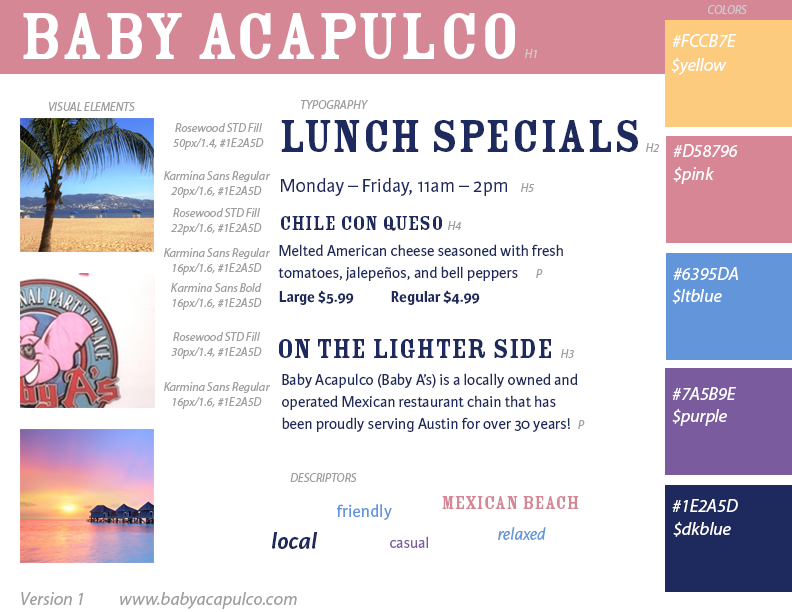
<style>
.page{position:relative;width:792px;height:612px;background:#fefffe}
.page>*{position:absolute;margin:0}
.t1{font:12px "MyriadPro-It";color:#cccaca}
.t2{font:72px "RosewoodStd-Fill";color:#ffffff}
.t3{font:18px "MyriadPro-It";color:#ffffff}
.t4{font:12px "MyriadPro-It";color:#9e9e9e}
.t5{font:50px "RosewoodStd-Fill";color:#1e2a5d}
.t6{font:20px "KarminaSans";color:#1e2a5d}
.t7{font:22px "RosewoodStd-Fill";color:#1e2a5d}
.t8{font:16px/22px "KarminaSans";color:#1e2a5d}
.t9{font:16px "KarminaSans-Bold";color:#1e2a5d}
.t10{font:30px "RosewoodStd-Fill";color:#1e2a5d}
.t11{font:20px "RosewoodStd-Fill";color:#d58796}
.t12{font:18px "KarminaSans";color:#6395da}
.t13{font:24px "KarminaSans-BoldItalic";color:#1e2a5d}
.t14{font:18px "KarminaSans-Italic";color:#6395da}
.t15{font:16px "KarminaSans";color:#7a5b9e}
.t16{font:18px "MyriadPro-It";color:#9e9e9e}
</style>
<div class="page">
<p class="t1" style="left:708px;top:5px;width:39px;height:9px">COLORS</p>
<p class="t2" style="left:23px;top:13px;width:492px;height:46px">BABY ACAPULCO</p>
<p class="t3" style="left:672px;top:34px;width:64px;height:13px">#FCCB7E</p>
<p class="t1" style="left:525px;top:49px;width:12px;height:9px">H1</p>
<p class="t3" style="left:671px;top:57px;width:56px;height:18px">$yellow</p>
<p class="t4" style="left:49px;top:102px;width:86px;height:9px">VISUAL ELEMENTS</p>
<p class="t4" style="left:300px;top:100px;width:68px;height:9px">TYPOGRAPHY</p>
<p class="t4" style="left:173px;top:123px;width:91px;height:27px;text-align:center">Rosewood STD Fill<br>50px/1.4, #1E2A5D</p>
<p class="t5" style="left:281px;top:120px;width:357px;height:32px">LUNCH SPECIALS</p>
<p class="t4" style="left:646px;top:143px;width:13px;height:9px">H2</p>
<p class="t3" style="left:673px;top:144px;width:65px;height:13px">#D58796</p>
<p class="t4" style="left:164px;top:171px;width:106px;height:27px;text-align:center">Karmina Sans Regular<br>20px/1.6, #1E2A5D</p>
<p class="t3" style="left:673px;top:166px;width:41px;height:18px">$pink</p>
<p class="t6" style="left:281px;top:177px;width:226px;height:19px">Monday – Friday, 11am – 2pm</p>
<p class="t4" style="left:521px;top:183px;width:13px;height:9px">H5</p>
<p class="t4" style="left:171px;top:208px;width:91px;height:27px;text-align:center">Rosewood STD Fill<br>22px/1.6, #1E2A5D</p>
<p class="t7" style="left:281px;top:216px;width:161px;height:15px">Chile con Queso</p>
<p class="t4" style="left:448px;top:221px;width:13px;height:9px">H4</p>
<p class="t8" style="left:278px;top:244px;width:285px;height:37px">Melted American cheese seasoned with fresh <br>tomatoes, jalepeños, and bell peppers</p>
<p class="t4" style="left:164px;top:248px;width:106px;height:27px;text-align:center">Karmina Sans Regular<br>16px/1.6, #1E2A5D</p>
<p class="t4" style="left:536px;top:269px;width:7px;height:9px">P</p>
<p class="t3" style="left:673px;top:267px;width:65px;height:13px">#6395DA</p>
<p class="t4" style="left:171px;top:283px;width:91px;height:27px;text-align:center">Karmina Sans Bold<br>16px/1.6, #1E2A5D</p>
<p class="t9" style="left:279px;top:290px;width:75px;height:15px">Large $5.99</p>
<p class="t9" style="left:391px;top:290px;width:89px;height:15px">Regular $4.99</p>
<p class="t3" style="left:672px;top:288px;width:50px;height:16px">$ltblue</p>
<p class="t4" style="left:171px;top:332px;width:91px;height:27px;text-align:center">Rosewood STD Fill<br>30px/1.4, #1E2A5D</p>
<p class="t10" style="left:279px;top:339px;width:272px;height:19px">On the lighter side</p>
<p class="t4" style="left:561px;top:349px;width:13px;height:9px">H3</p>
<p class="t8" style="left:282px;top:373px;width:296px;height:59px">Baby Acapulco (Baby A’s) is a locally owned and operated Mexican restaurant chain that has been proudly serving Austin for over 30 years!</p>
<p class="t4" style="left:164px;top:382px;width:106px;height:27px;text-align:center">Karmina Sans Regular<br>16px/1.6, #1E2A5D</p>
<p class="t3" style="left:672px;top:387px;width:64px;height:13px">#7A5B9E</p>
<p class="t3" style="left:672px;top:408px;width:55px;height:18px">$purple</p>
<p class="t4" style="left:578px;top:420px;width:7px;height:9px">P</p>
<p class="t4" style="left:290px;top:473px;width:67px;height:9px">DESCRIPTORS</p>
<p class="t11" style="left:442px;top:496px;width:137px;height:13px">mexican beach</p>
<p class="t12" style="left:336px;top:504px;width:56px;height:16px">friendly</p>
<p class="t3" style="left:672px;top:499px;width:66px;height:13px">#1E2A5D</p>
<p class="t3" style="left:673px;top:521px;width:58px;height:16px">$dkblue</p>
<p class="t13" style="left:272px;top:532px;width:46px;height:17px">local</p>
<p class="t14" style="left:498px;top:527px;width:48px;height:13px">relaxed</p>
<p class="t15" style="left:390px;top:536px;width:38px;height:12px">casual</p>
<p class="t16" style="left:21px;top:592px;width:62px;height:13px">Version 1</p>
<p class="t16" style="left:120px;top:592px;width:177px;height:17px">www.babyacapulco.com</p>
</div>
